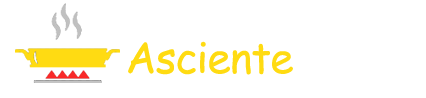
<style>
.page{position:relative;width:426px;height:98px;background:#ffffff}
.page>*{position:absolute;margin:0}
.t1{font:42.4px "ComicSansMS";letter-spacing:-0.02em;color:#ffdb12}
</style>
<div class="page">
<p class="t1" style="left:128px;top:41px;width:165px;height:34px">Asciente</p>
</div>
